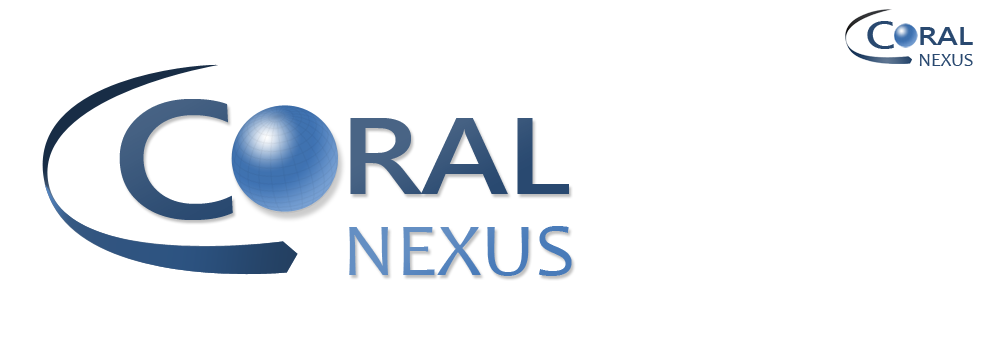
<style>
.page{position:relative;width:1000px;height:350px;background:#ffffff}
.page>*{position:absolute;margin:0}
.t1{font:36px "MicrosoftJhengHeiBold";letter-spacing:-0.02em;color:#294970;scale:1.24 1}
.t2{font:24px "MicrosoftJhengHeiBold";letter-spacing:-0.02em;color:#294970;scale:1.24 1}
.t3{font:18.7px "Candara";color:#294970}
.t4{font:155px "MicrosoftJhengHeiBold";letter-spacing:-0.02em;color:#294970;scale:1.24 1}
.t5{font:100px "MicrosoftJhengHeiBold";letter-spacing:-0.02em;color:#294970;scale:1.24 1}
.t6{font:75px "Candara";color:#497bb9;scale:1.05 1}
</style>
<div class="page">
<p class="t1" style="left:867px;top:21px;width:27px;height:28px">C</p>
<p class="t2" style="left:920px;top:27px;width:53px;height:18px">RAL</p>
<p class="t3" style="left:919px;top:54px;width:54px;height:12px">NEXUS</p>
<p class="t4" style="left:119px;top:99px;width:114px;height:121px">C</p>
<p class="t5" style="left:350px;top:118px;width:219px;height:76px">RAL</p>
<p class="t6" style="left:349px;top:226px;width:223px;height:50px">NEXUS</p>
</div>
